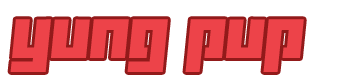
<style>
.page{position:relative;width:346px;height:76px;background:#ffffff}
.page>*{position:absolute;margin:0}
.t1{font:72px "Yukarimobile";color:#ed4349}
</style>
<div class="page">
<p class="t1" style="left:10px;top:19px;width:294px;height:53px">yung pup</p>
</div>
